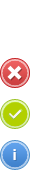
<style>
.page{position:relative;width:30px;height:170px;background:#ffffff}
.page>*{position:absolute;margin:0}
.t1{font:15px "Arial-BoldMT";color:#ffffff}
</style>
<div class="page">
<p class="t1" style="left:13px;top:149px;width:3px;height:11px">i</p>
</div>
